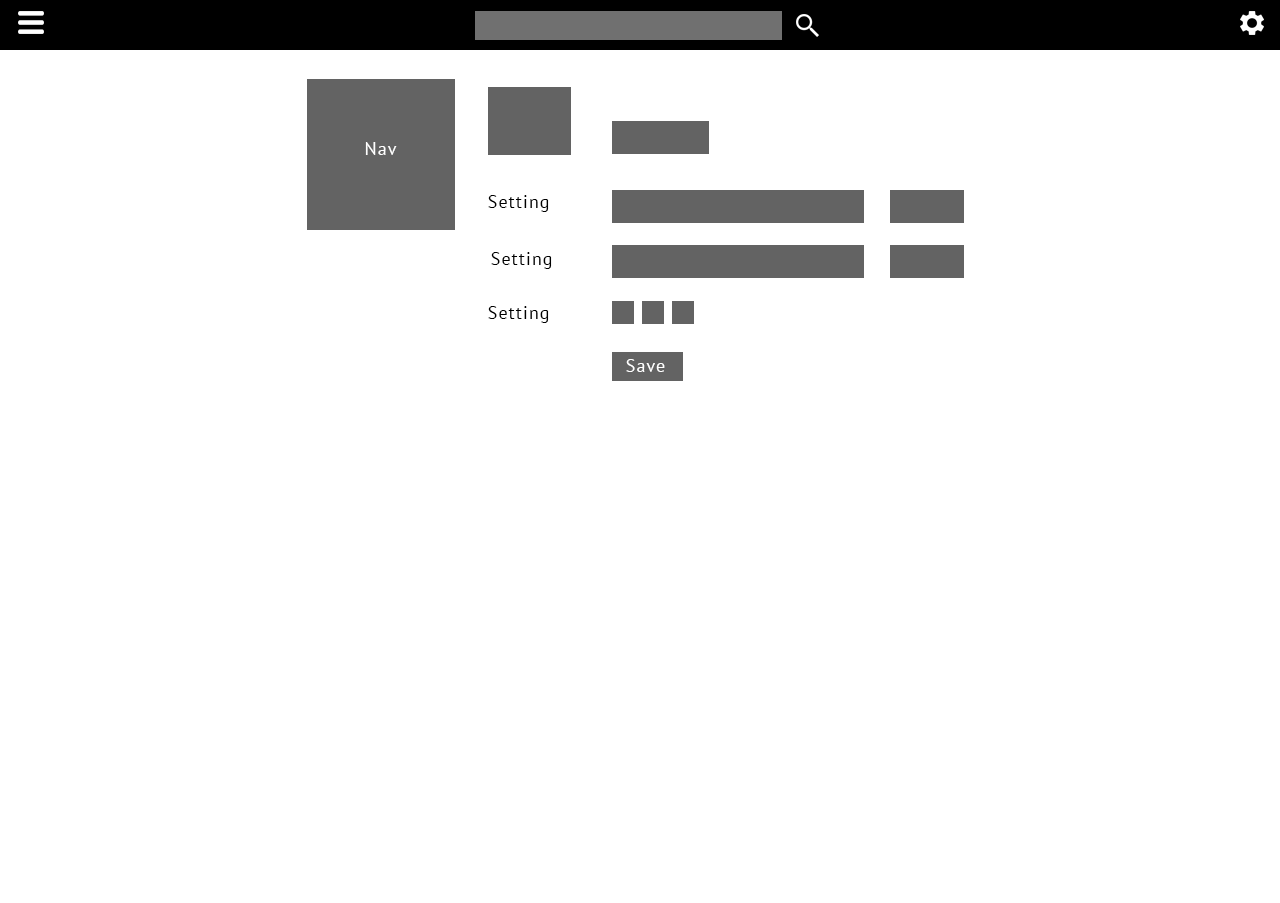
<style>
.page{position:relative;width:1280px;height:903px;background:#ffffff}
.page>*{position:absolute;margin:0}
.t1{font:18px "PTSans-Regular";letter-spacing:0.06em;color:#ffffff}
.t2{font:18px "PTSans-Regular";letter-spacing:0.06em;color:#000000}
</style>
<div class="page">
<p class="t1" style="left:365px;top:142px;width:32px;height:13px">Nav</p>
<p class="t2" style="left:488px;top:195px;width:61px;height:17px">Setting</p>
<p class="t2" style="left:491px;top:252px;width:61px;height:17px">Setting</p>
<p class="t2" style="left:488px;top:306px;width:61px;height:17px">Setting</p>
<p class="t1" style="left:626px;top:359px;width:39px;height:13px">Save</p>
</div>
